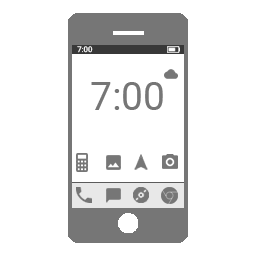
<style>
.page{position:relative;width:256px;height:256px;background:#ffffff}
.page>*{position:absolute;margin:0}
.t1{font:7.8px "Roboto-Regular";color:#ffffff}
.t2{font:39px "Roboto-Regular";color:#767676}
</style>
<div class="page">
<p class="t1" style="left:77px;top:46px;width:16px;height:7px">7:00</p>
<p class="t2" style="left:91px;top:82px;width:72px;height:28px">7:00</p>
</div>
